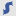
<style>
.page{position:relative;width:16px;height:16px;background:#e5e5e5}
.page>*{position:absolute;margin:0}
.t1{font:16.7px "AshleyCrawford";color:#3b5999}
</style>
<div class="page">
<p class="t1" style="left:3px;top:1px;width:10px;height:14px">S</p>
</div>
